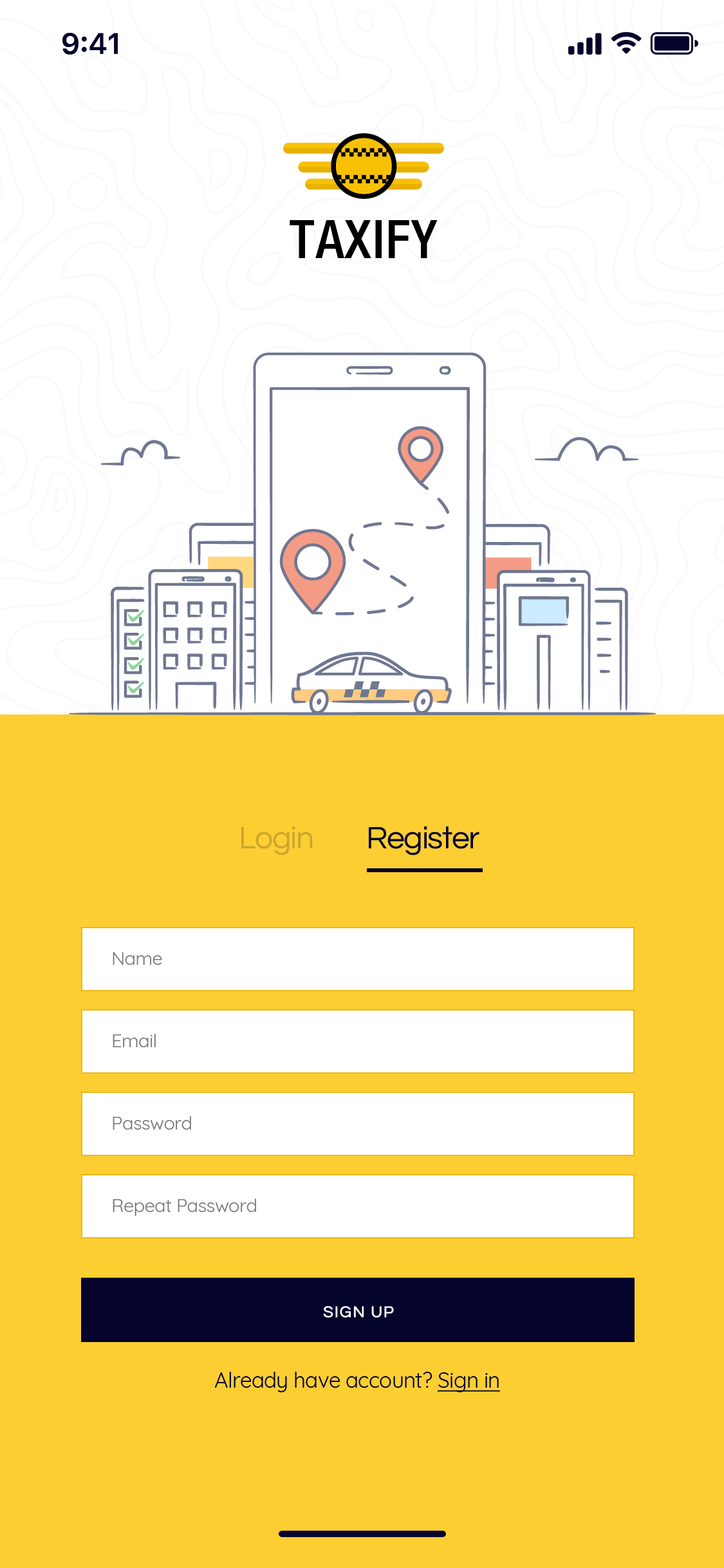
<style>
.page{position:relative;width:724px;height:1568px;background:#ffffff}
.page>*{position:absolute;margin:0}
.t1{font:53.6px "HelveticaNeue-MediumCond";letter-spacing:0.02em;color:#000000;text-transform:uppercase}
.t2{font:32.2px "Questrial-Regular";letter-spacing:-0.03em;color:#cba531}
.t3{font:32.2px "Questrial-Regular";letter-spacing:-0.03em;color:#03032b}
.t4{font:18.8px "Quicksand-Regular";letter-spacing:-0.02em;color:#777777}
.t5{font:16.1px "Questrial-Regular";letter-spacing:0.06em;color:#ffffff;font-weight:bold}
.t6{font:21.5px "Quicksand-Regular";letter-spacing:-0.02em;color:#03032b}
.t7{font:21.5px "Quicksand-Regular";letter-spacing:-0.02em;color:#03032b;text-decoration:underline}
</style>
<div class="page">
<p class="t1" style="left:290px;top:220px;width:148px;height:38px">Taxify</p>
<p class="t2" style="left:241px;top:826px;width:72px;height:29px">Login</p>
<p class="t3" style="left:369px;top:826px;width:111px;height:29px">Register</p>
<p class="t4" style="left:113px;top:952px;width:49px;height:13px">Name</p>
<p class="t4" style="left:113px;top:1034px;width:43px;height:13px">Email</p>
<p class="t4" style="left:113px;top:1116px;width:78px;height:14px">Password</p>
<p class="t4" style="left:113px;top:1199px;width:143px;height:17px">Repeat Password</p>
<p class="t5" style="left:323px;top:1306px;width:71px;height:12px">SIGN UP</p>
<p class="t6" style="left:215px;top:1372px;width:285px;height:20px">Already have account? <span class="t7">Sign in</span></p>
</div>
